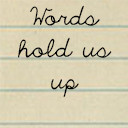
<style>
.page{position:relative;width:128px;height:128px}
.page>*{position:absolute;margin:0}
.t1{font:22.6px/32px "TheOnlyException";color:#000000}
</style>
<div class="page">
<p class="t1" style="left:18px;top:5px;width:94px;height:92px;text-align:center">Words hold us up</p>
</div>
